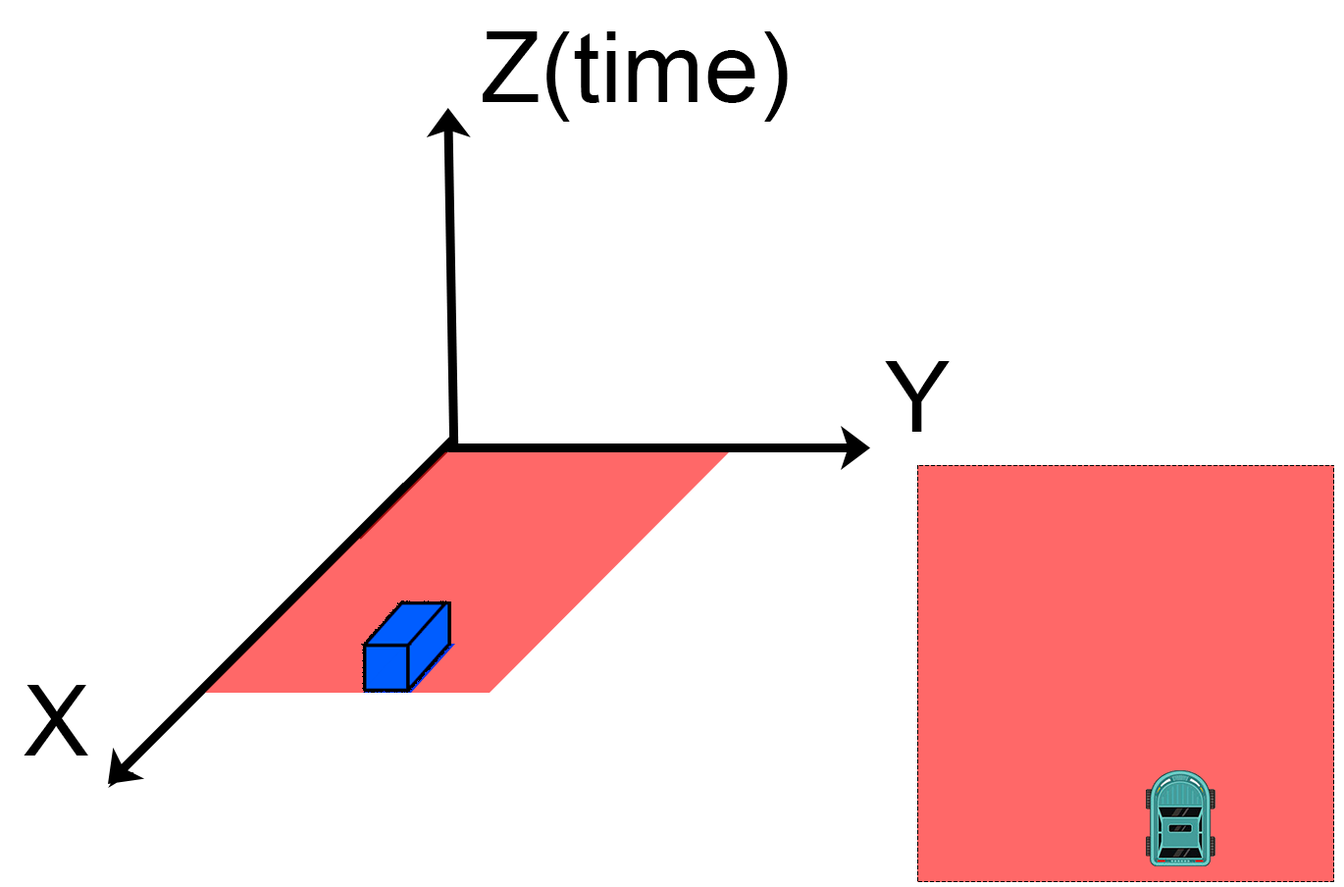
<style>
.page{position:relative;width:1344px;height:887px;background:#ffffff}
.page>*{position:absolute;margin:0}
.t1{font:98.1px "ArialMT";color:#000000}
</style>
<div class="page">
<p class="t1" style="left:483px;top:31px;width:305px;height:91px">Z(time)</p>
<p class="t1" style="left:885px;top:361px;width:65px;height:71px">Y</p>
<p class="t1" style="left:24px;top:685px;width:64px;height:71px">X</p>
</div>
